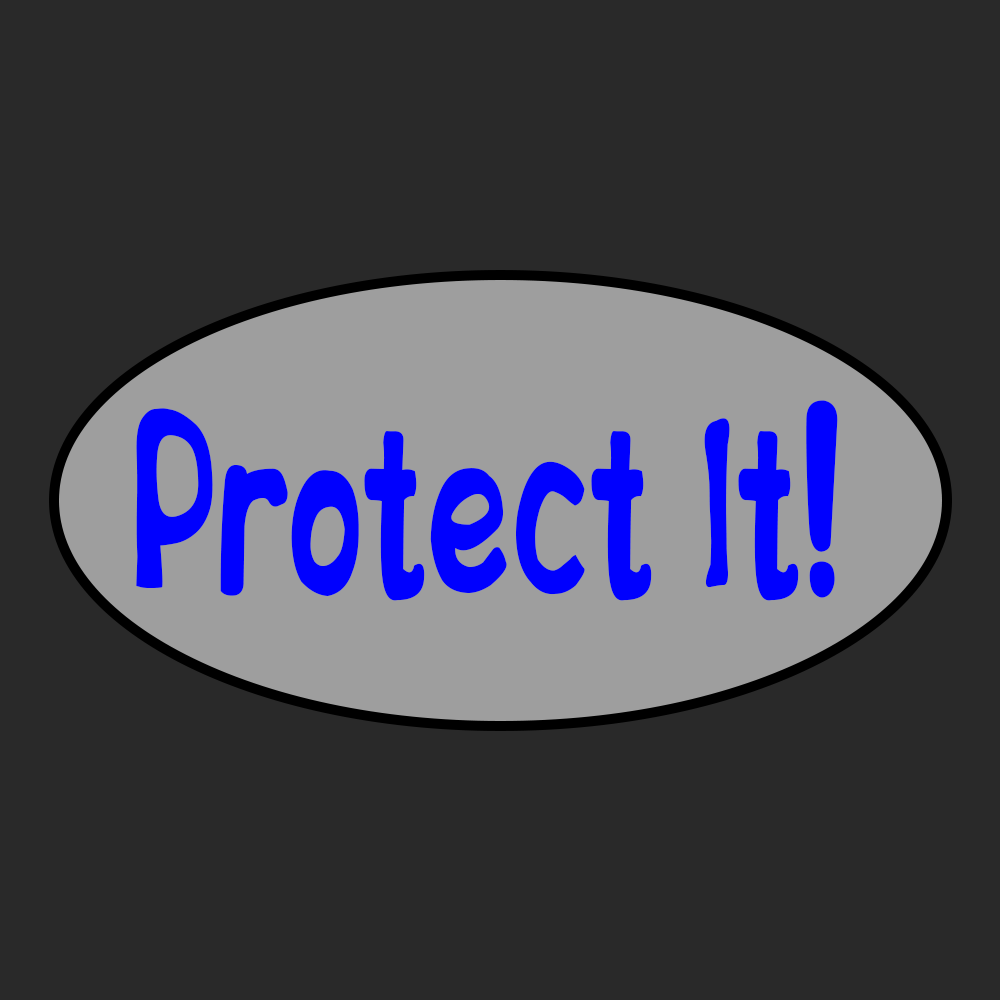
<style>
.page{position:relative;width:1000px;height:1000px;background:#292929}
.page>*{position:absolute;margin:0}
.t1{font:224.9px "BIPs";letter-spacing:0.01em;color:#0000fe;scale:0.64 1}
</style>
<div class="page">
<p class="t1" style="left:136px;top:400px;width:702px;height:201px">Protect It!</p>
</div>
